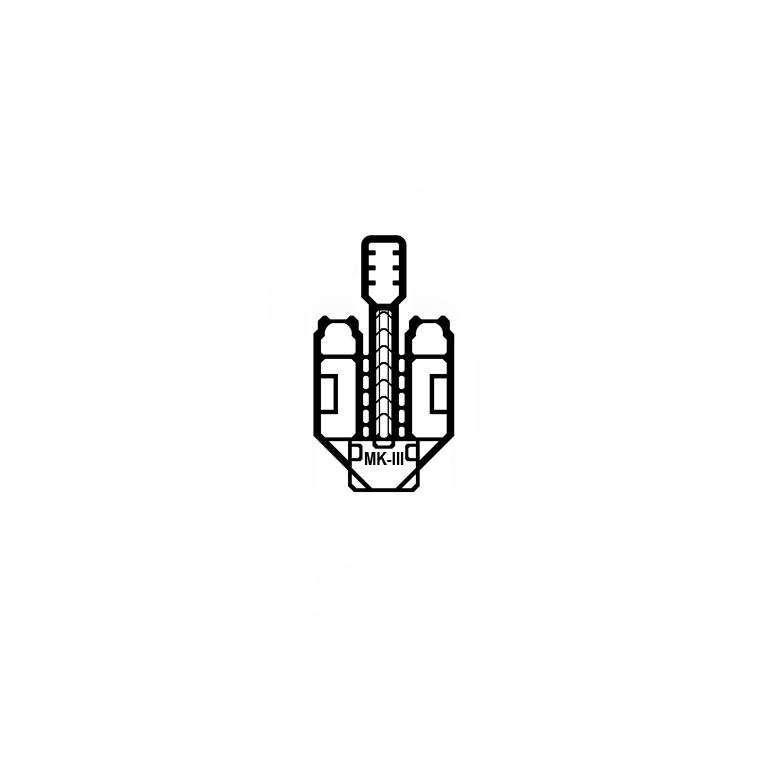
<style>
.page{position:relative;width:768px;height:768px;background:#ffffff}
.page>*{position:absolute;margin:0}
.t1{font:18px "ArialNarrow-Bold";color:#010002}
</style>
<div class="page">
<p class="t1" style="left:364px;top:452px;width:40px;height:13px">MK-III</p>
</div>
